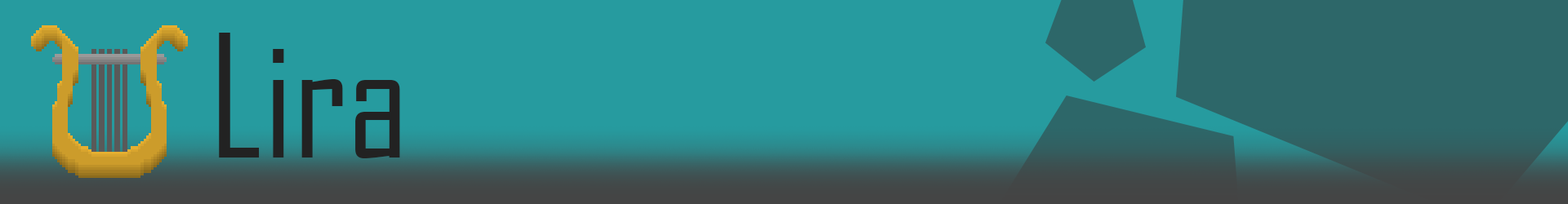
<style>
.page{position:relative;width:1568px;height:204px;background:#269b9f}
.page>*{position:absolute;margin:0}
.t1{font:163.3px "AgencyFB-Reg";color:#222222}
</style>
<div class="page">
<p class="t1" style="left:219px;top:33px;width:181px;height:125px">Lira</p>
</div>
